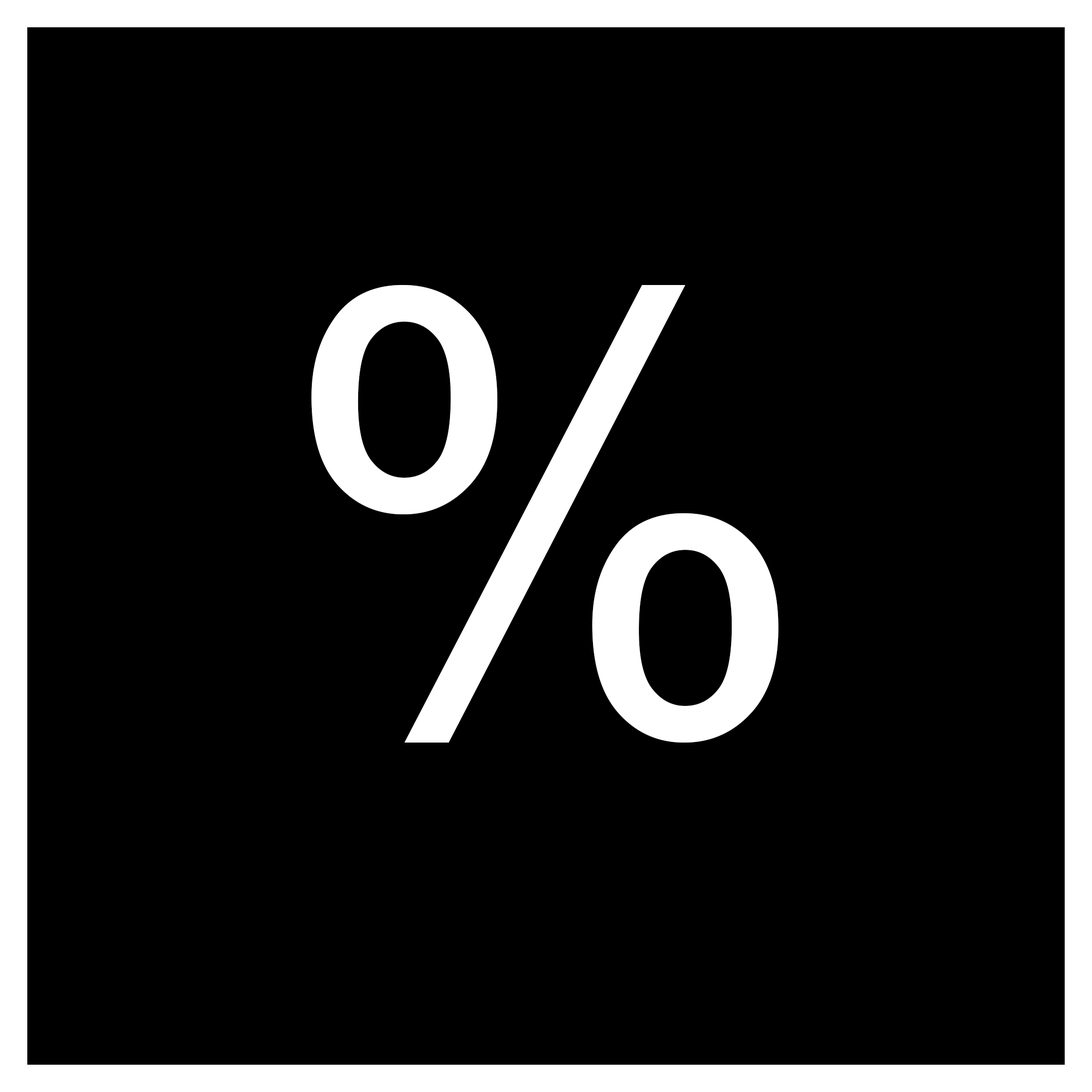
<style>
.page{position:relative;width:1092px;height:1092px;background:#000000}
.page>*{position:absolute;margin:0}
.t1{font:606.7px "ArialMT";color:#ffffff}
</style>
<div class="page">
<p class="t1" style="left:311px;top:285px;width:468px;height:458px">%</p>
</div>
